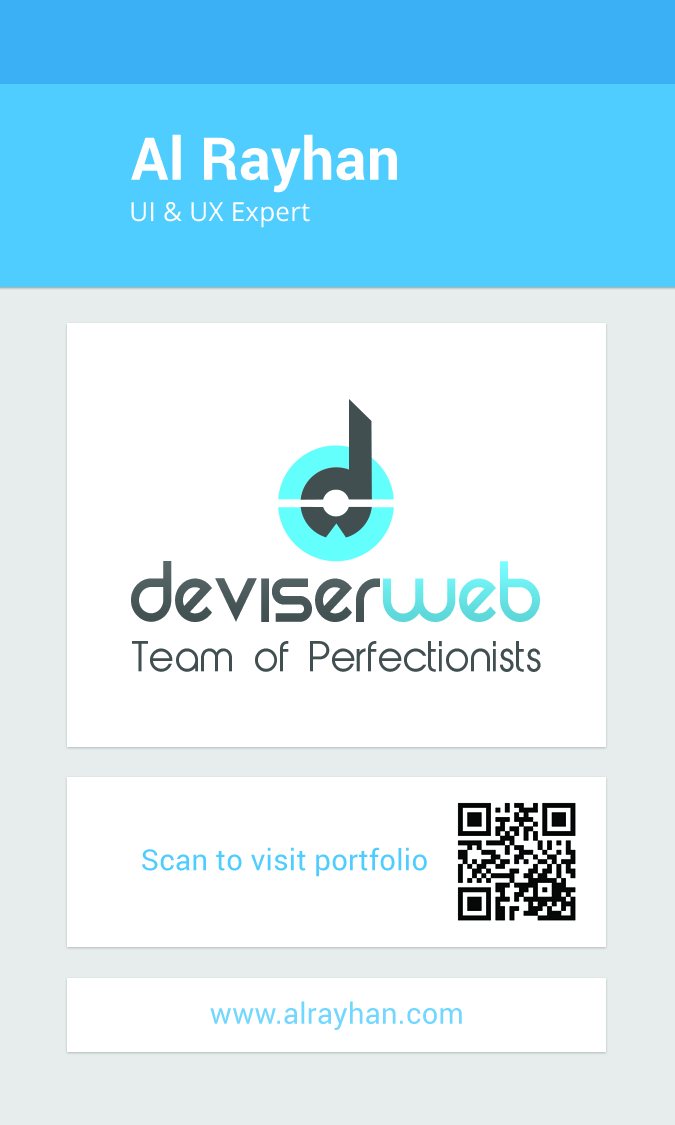
<style>
.page{position:relative;width:675px;height:1125px;background:#ffffff}
.page>*{position:absolute;margin:0}
.t1{font:58.9px "Roboto-Bold";letter-spacing:0.01em;color:#ffffff}
.t2{font:26.1px "OpenSans";letter-spacing:0.01em;color:#ffffff}
.t3{font:29.2px "Roboto-Regular";letter-spacing:0.01em;color:#4fcdff}
.t4{font:29.2px "Roboto-Regular";letter-spacing:0.01em;color:#72d7ff}
</style>
<div class="page">
<p class="t1" style="left:131px;top:134px;width:266px;height:59px">Al Rayhan</p>
<p class="t2" style="left:131px;top:202px;width:179px;height:26px">UI &amp; UX Expert</p>
<p class="t3" style="left:142px;top:847px;width:285px;height:30px">Scan to visit portfolio</p>
<p class="t4" style="left:210px;top:1001px;width:252px;height:29px">www.alrayhan.com</p>
</div>
